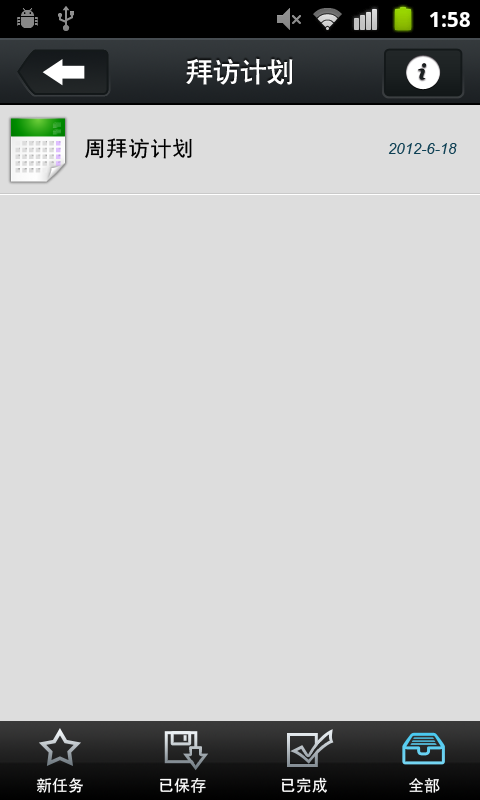
<style>
.page{position:relative;width:480px;height:800px;background:#dddddd}
.page>*{position:absolute;margin:0}
.t1{font:27px "CTCuHeiSJ";color:#ffffff}
.t2{font:22px "SimHei";color:#000000}
.t3{font:15px "Arial-ItalicMT";color:#0e4054}
.t4{font:16px "SimHei";color:#ffffff}
</style>
<div class="page">
<p class="t1" style="left:186px;top:58px;width:107px;height:27px">拜访计划</p>
<p class="t2" style="left:85px;top:138px;width:107px;height:21px">周拜访计划</p>
<p class="t3" style="left:388px;top:143px;width:69px;height:11px">2012-6-18</p>
<p class="t4" style="left:36px;top:778px;width:47px;height:15px">新任务</p>
<p class="t4" style="left:160px;top:778px;width:46px;height:15px">已保存</p>
<p class="t4" style="left:281px;top:777px;width:46px;height:16px">已完成</p>
<p class="t4" style="left:409px;top:778px;width:31px;height:15px">全部</p>
</div>
